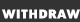
<style>
.page{position:relative;width:80px;height:22px;background:#333333}
.page>*{position:absolute;margin:0}
.t1{font:13.5px "TwCenMT-CondensedExtraBold";color:#ffffff;scale:1.33 1}
</style>
<div class="page">
<p class="t1" style="left:2px;top:9px;width:78px;height:10px">WITHDRAW</p>
</div>
